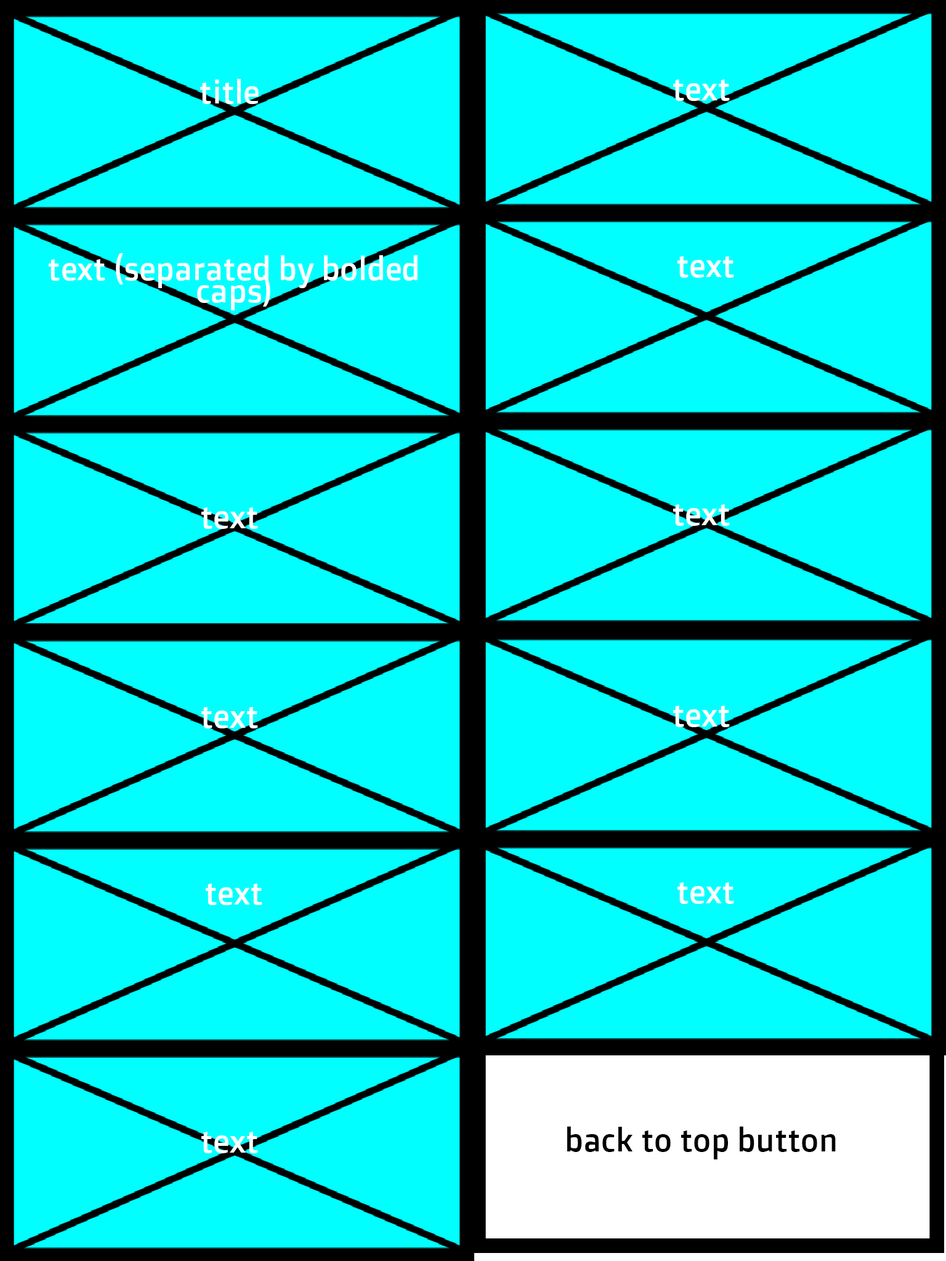
<style>
.page{position:relative;width:946px;height:1261px;background:#00ffff}
.page>*{position:absolute;margin:0}
.t1{font:32.4px "DoppioOne-Regular";color:#ffffff;scale:0.96 1}
.t2{font:32.4px/22.2px "DoppioOne-Regular";color:#ffffff;scale:0.96 1}
.t3{font:32.4px "DoppioOne-Regular";color:#010101;scale:0.96 1}
</style>
<div class="page">
<p class="t1" style="left:200px;top:79px;width:59px;height:25px">title</p>
<p class="t1" style="left:673px;top:79px;width:57px;height:22px">text</p>
<p class="t2" style="left:49px;top:253px;width:368px;height:57px;text-align:center">text (separated by bolded caps)</p>
<p class="t1" style="left:677px;top:256px;width:57px;height:22px">text</p>
<p class="t1" style="left:201px;top:507px;width:57px;height:22px">text</p>
<p class="t1" style="left:673px;top:504px;width:57px;height:22px">text</p>
<p class="t1" style="left:201px;top:707px;width:57px;height:21px">text</p>
<p class="t1" style="left:673px;top:706px;width:57px;height:21px">text</p>
<p class="t1" style="left:206px;top:884px;width:56px;height:21px">text</p>
<p class="t1" style="left:677px;top:882px;width:57px;height:22px">text</p>
<p class="t1" style="left:201px;top:1132px;width:57px;height:21px">text</p>
<p class="t3" style="left:567px;top:1126px;width:268px;height:33px">back to top button</p>
</div>
